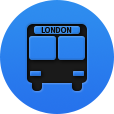
<style>
.page{position:relative;width:114px;height:114px;background:#ffffff}
.page>*{position:absolute;margin:0}
.t1{font:8px "SourceSansPro-Semibold";letter-spacing:0.02em;color:#000000}
</style>
<div class="page">
<p class="t1" style="left:41px;top:27px;width:31px;height:6px">LONDON</p>
</div>
